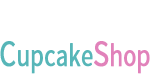
<style>
.page{position:relative;width:150px;height:75px;background:#ffffff}
.page>*{position:absolute;margin:0}
.t1{font:31.2px "SourceSansPro-Regular";color:#57b6b8;font-weight:bold;scale:0.77 1}
.t2{font:37.7px "SourceSansPro-Regular";color:#57b6b8;font-weight:bold;scale:0.77 1}
.t3{font:37.7px "SourceSansPro-Regular";color:#e182ba;font-weight:bold;scale:0.77 1}
.t4{font:31.2px "SourceSansPro-Regular";color:#e182ba;font-weight:bold;scale:0.77 1}
</style>
<div class="page">
<p class="t1" style="left:0px;top:41px;width:150px;height:33px"><span class="t2">C</span>upcake<span class="t3">S</span><span class="t4">hop</span></p>
</div>
